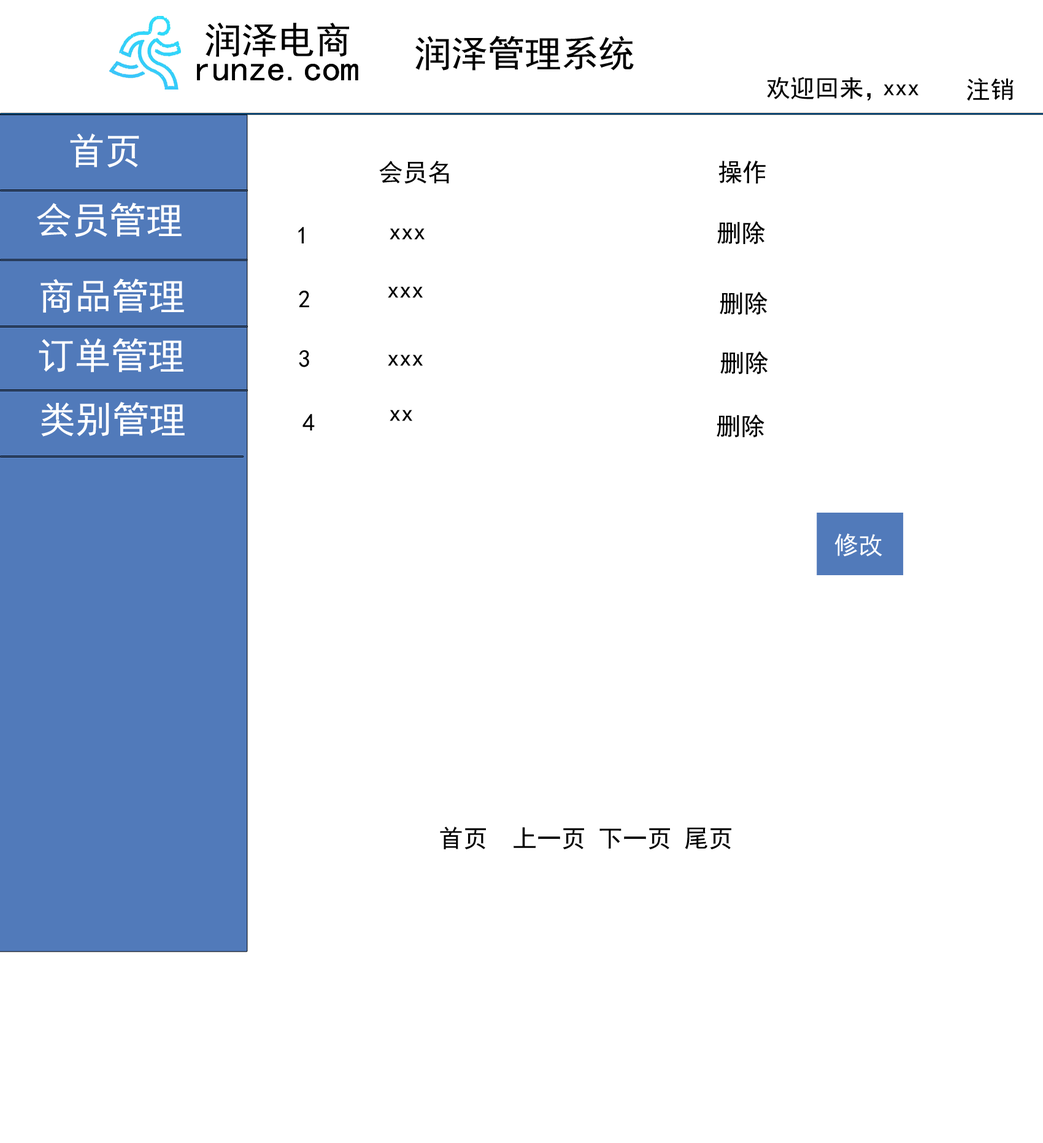
<style>
.page{position:relative;width:1043px;height:1143px;background:#ffffff}
.page>*{position:absolute;margin:0}
.t1{font:36.8px "SimHei";color:#010101}
.t2{font:24.5px "SimHei";color:#000000}
.t3{font:36.8px "SimHei";color:#ffffff}
.t4{font:24.5px "SimHei";color:#ffffff}
</style>
<div class="page">
<p class="t1" style="left:206px;top:23px;width:143px;height:34px">润泽电商</p>
<p class="t1" style="left:415px;top:36px;width:219px;height:35px">润泽管理系统</p>
<p class="t1" style="left:197px;top:64px;width:161px;height:17px">runze.com</p>
<p class="t1" style="left:197px;top:64px;width:161px;height:17px">runze.com</p>
<p class="t2" style="left:767px;top:77px;width:103px;height:24px">欢迎回来，</p>
<p class="t2" style="left:967px;top:78px;width:46px;height:23px">注销</p>
<p class="t2" style="left:883px;top:84px;width:35px;height:12px">xxx</p>
<p class="t3" style="left:70px;top:133px;width:69px;height:34px">首页</p>
<p class="t2" style="left:379px;top:161px;width:70px;height:23px">会员名</p>
<p class="t2" style="left:718px;top:161px;width:48px;height:23px">操作</p>
<p class="t3" style="left:37px;top:202px;width:145px;height:35px">会员管理</p>
<p class="t2" style="left:717px;top:221px;width:48px;height:24px">删除</p>
<p class="t2" style="left:298px;top:227px;width:6px;height:17px">1</p>
<p class="t2" style="left:390px;top:228px;width:34px;height:12px">xxx</p>
<p class="t3" style="left:40px;top:279px;width:144px;height:34px">商品管理</p>
<p class="t2" style="left:299px;top:291px;width:10px;height:16px">2</p>
<p class="t2" style="left:388px;top:286px;width:35px;height:12px">xxx</p>
<p class="t2" style="left:720px;top:292px;width:47px;height:23px">删除</p>
<p class="t3" style="left:39px;top:338px;width:144px;height:34px">订单管理</p>
<p class="t2" style="left:299px;top:350px;width:10px;height:17px">3</p>
<p class="t2" style="left:720px;top:351px;width:48px;height:24px">删除</p>
<p class="t2" style="left:388px;top:355px;width:35px;height:11px">xxx</p>
<p class="t3" style="left:41px;top:402px;width:144px;height:35px">类别管理</p>
<p class="t2" style="left:390px;top:410px;width:22px;height:11px">xx</p>
<p class="t2" style="left:302px;top:414px;width:13px;height:17px">4</p>
<p class="t2" style="left:716px;top:415px;width:48px;height:23px">删除</p>
<p class="t4" style="left:834px;top:534px;width:48px;height:23px">修改</p>
<p class="t2" style="left:440px;top:827px;width:291px;height:23px">首页  上一页 下一页 尾页</p>
</div>
